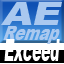
<style>
.page{position:relative;width:64px;height:64px;background:#a9c8ef}
.page>*{position:absolute;margin:0}
.t1{font:30.7px "Arial-Black";color:#a9c8ef;font-style:italic;scale:1.27 1}
.t2{font:19.3px "Arial-Black";color:#a9c8ef;font-style:italic;scale:0.76 1}
.t3{font:30.5px "Arial-Black";color:#ffffff;font-style:italic;scale:0.45 1}
</style>
<div class="page">
<p class="t1" style="left:1px;top:2px;width:61px;height:23px">AE</p>
<p class="t2" style="left:3px;top:26px;width:57px;height:18px">Remap</p>
<p class="t3" style="left:4px;top:39px;width:56px;height:22px">Exceed</p>
</div>
